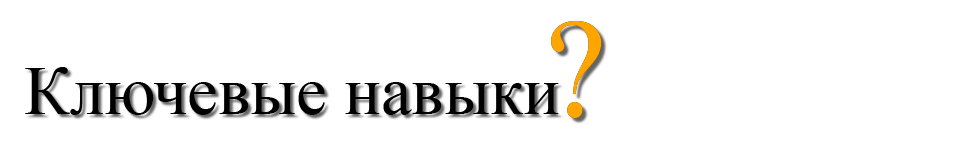
<style>
.page{position:relative;width:960px;height:141px;background:#ffffff}
.page>*{position:absolute;margin:0}
.t1{font:138.6px "TimesNewRomanPSMT";color:#ffa500}
.t2{font:69px "TimesNewRomanPSMT";color:#000000}
</style>
<div class="page">
<p class="t1" style="left:551px;top:21px;width:51px;height:97px">?</p>
<p class="t1" style="left:551px;top:21px;width:51px;height:97px">?</p>
<p class="t2" style="left:25px;top:67px;width:534px;height:48px">Ключевые навыки</p>
</div>
